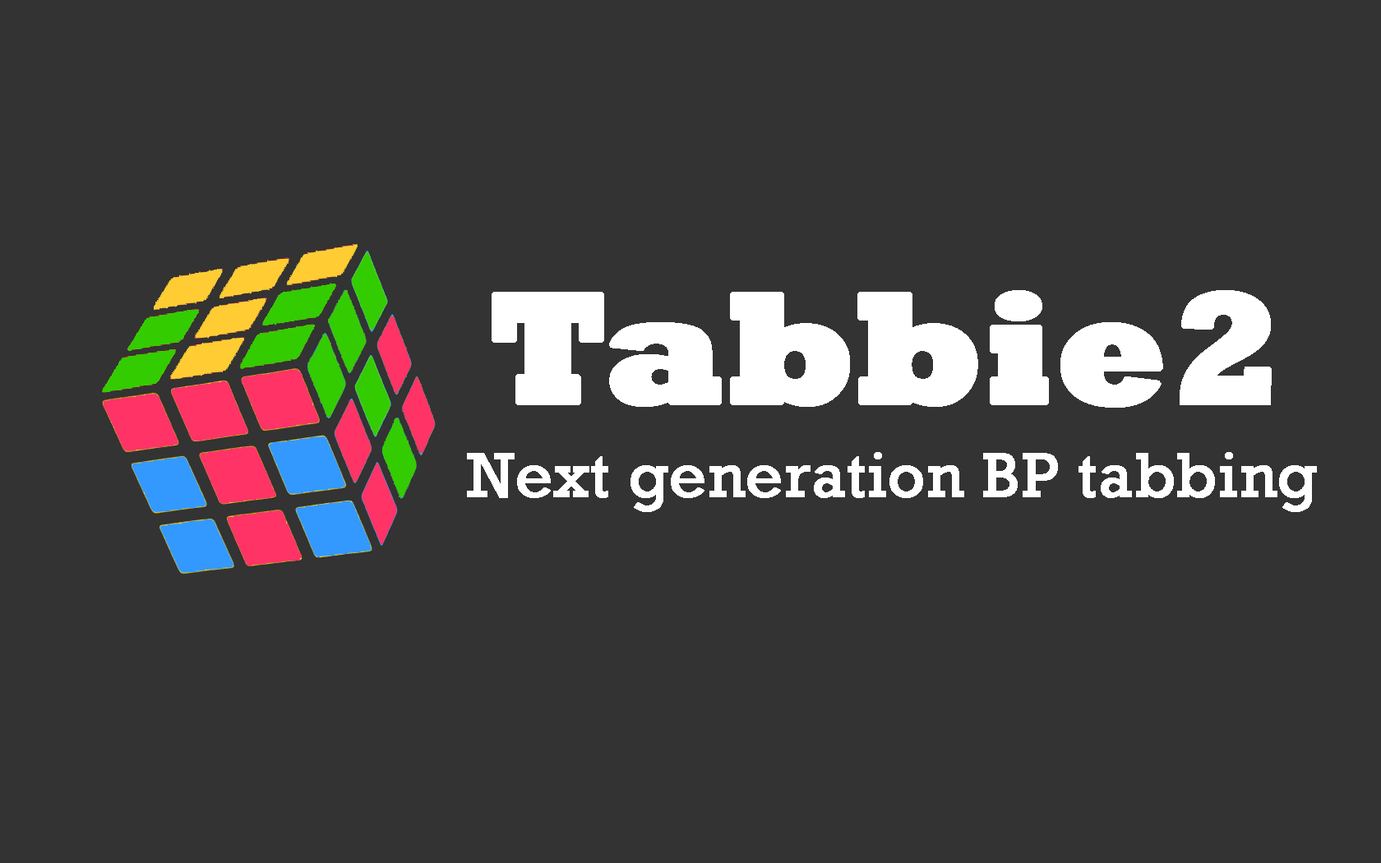
<style>
.page{position:relative;width:1381px;height:863px;background:#333333}
.page>*{position:absolute;margin:0}
.t1{font:274.1px "Rockwell-ExtraBold";color:#ffffff;font-weight:bold}
.t2{font:109.6px "Rockwell";color:#ffffff;font-weight:bold}
</style>
<div class="page">
<p class="t1" style="left:492px;top:290px;width:780px;height:118px">Tabbie2</p>
<p class="t2" style="left:467px;top:452px;width:850px;height:60px">Next generation BP tabbing</p>
</div>
